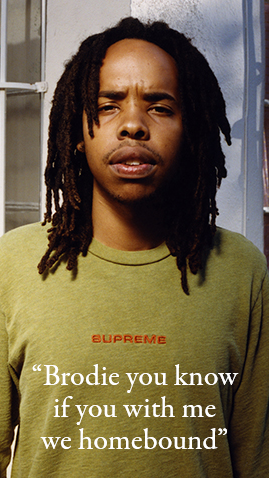
<style>
.page{position:relative;width:269px;height:478px}
.page>*{position:absolute;margin:0}
.t1{font:30px/32px "GaramondPremrPro-Med";color:#ffffff}
</style>
<div class="page">
<p class="t1" style="left:32px;top:364px;width:207px;height:85px;text-align:center">“Brodie you know<br>if you with me<br>we homebound”</p>
</div>
